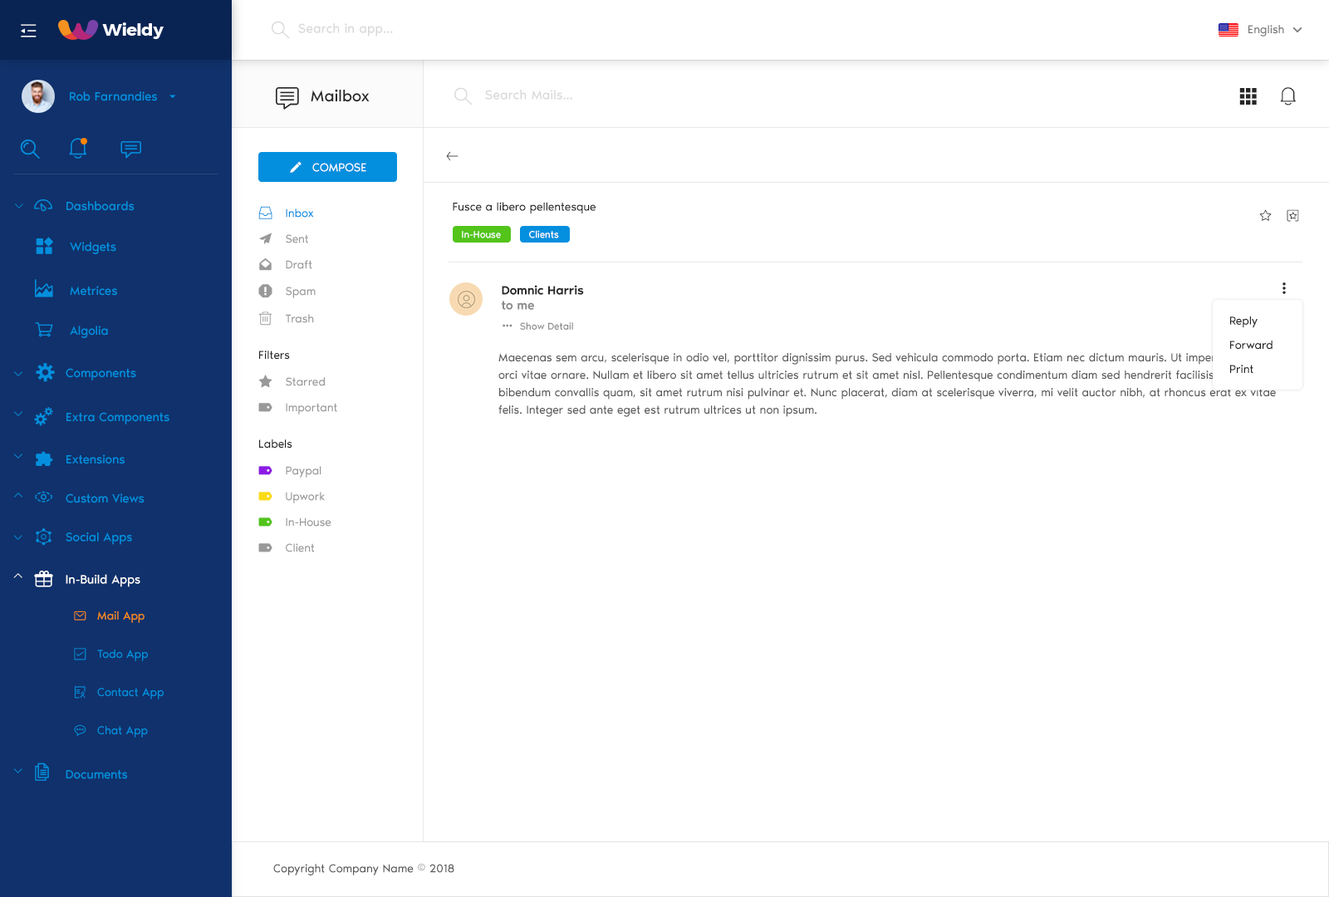
<style>
.page{position:relative;width:1329px;height:897px;background:#ffffff}
.page>*{position:absolute;margin:0}
.t1{font:13.3px "NoirPro-Regular";color:#d9d9d9}
.t2{font:11.6px "NoirPro-Regular";color:#757575}
.t3{font:23.3px "gaxonant";color:#262626}
.t4{font:16.6px "NoirPro-Regular";color:#262626}
.t5{font:18.3px "gaxonant";color:#262626}
.t6{font:12.5px "NoirPro-Regular";color:#038fde}
.t7{font:11.6px "gaxonant";color:#ffffff;text-transform:uppercase}
.t8{font:11.6px "gaxonant"}
.t9{font:11.6px "NoirPro-Regular";color:#ffffff;text-transform:uppercase}
.t10{font:10px "gaxonant"}
.t11{font:18.3px "gaxonant";color:#038fde}
.t12{font:11.6px "NoirPro-Regular";color:#038fde}
.t13{font:11.6px "NoirPro-Regular";color:#262626}
.t14{font:10px "NoirPro-Regular";color:#ffffff}
.t15{font:11.6px "NoirPro-Regular";color:#999999}
.t16{font:13.3px "gaxonant";color:#999999}
.t17{font:12.5px "NoirPro-Medium";color:#262626}
.t18{font:12.5px "gaxonant";color:#262626}
.t19{font:12.5px "NoirPro-Medium";color:#8c8c8c}
.t20{font:11.6px/19.9px "NoirPro-Regular";color:#262626}
.t21{font:10px "gaxonant";color:#8c8c8c}
.t22{font:10px "NoirPro-Regular";color:#8c8c8c}
.t23{font:11.6px/17.4px "NoirPro-Regular";color:#595959}
.t24{font:9.7px "gaxonant";color:#038fde}
.t25{font:10px "gaxonant";color:#038fde}
.t26{font:12.4px "NoirPro-Regular";color:#038fde}
.t27{font:10px "gaxonant";color:#ffffff}
.t28{font:12.4px "NoirPro-Regular";color:#ffffff}
.t29{font:11.8px "gaxonant";color:#fa8c16}
.t30{font:11.8px "NoirPro-Regular";color:#fa8c16}
.t31{font:11.8px "NoirPro-Regular";color:#038fde}
.t32{font:11.8px "gaxonant";color:#038fde}
.t33{font:18.2px "gaxonant";color:#038fde}
.t34{font:11.6px "NoirPro-Regular";color:#595959}
</style>
<div class="page">
<p class="t1" style="left:298px;top:23px;width:95px;height:14px">Search in app...</p>
<p class="t2" style="left:1249px;top:25px;width:35px;height:12px">English</p>
<p class="t3" style="left:276px;top:87px;width:23px;height:23px">U</p>
<p class="t4" style="left:311px;top:89px;width:59px;height:13px">Mailbox</p>
<p class="t1" style="left:485px;top:90px;width:87px;height:10px">Search Mails...</p>
<p class="t5" style="left:1239px;top:88px;width:18px;height:17px">k</p>
<p class="t6" style="left:70px;top:91px;width:87px;height:10px">Rob Farnandies</p>
<p class="t7" style="left:290px;top:161px;width:12px;height:12px">_</p>
<p class="t8" style="left:446px;top:151px;width:13px;height:10px">o</p>
<p class="t9" style="left:312px;top:163px;width:54px;height:9px">Compose</p>
<p class="t10" style="left:15px;top:204px;width:8px;height:5px">2</p>
<p class="t11" style="left:34px;top:199px;width:18px;height:13px">-</p>
<p class="t6" style="left:66px;top:201px;width:69px;height:10px">Dashboards</p>
<p class="t12" style="left:286px;top:209px;width:28px;height:9px">Inbox</p>
<p class="t13" style="left:453px;top:202px;width:143px;height:11px">Fusce a libero pellentesque</p>
<p class="t14" style="left:462px;top:231px;width:39px;height:7px">In-House</p>
<p class="t14" style="left:529px;top:230px;width:30px;height:8px">Clients</p>
<p class="t6" style="left:70px;top:242px;width:46px;height:12px">Widgets</p>
<p class="t15" style="left:286px;top:234px;width:22px;height:9px">Sent</p>
<p class="t16" style="left:259px;top:258px;width:13px;height:13px">[</p>
<p class="t15" style="left:286px;top:260px;width:26px;height:9px">Draft</p>
<p class="t11" style="left:35px;top:279px;width:18px;height:18px">m</p>
<p class="t6" style="left:70px;top:286px;width:47px;height:10px">Metrices</p>
<p class="t15" style="left:286px;top:287px;width:30px;height:11px">Spam</p>
<p class="t17" style="left:502px;top:285px;width:82px;height:10px">Domnic Harris</p>
<p class="t18" style="left:1283px;top:282px;width:3px;height:12px">|</p>
<p class="t19" style="left:502px;top:301px;width:32px;height:9px">to me</p>
<p class="t15" style="left:286px;top:314px;width:28px;height:9px">Trash</p>
<p class="t20" style="left:1230px;top:316px;width:43px;height:58px">Reply<br>Forward<br>Print</p>
<p class="t6" style="left:70px;top:326px;width:38px;height:12px">Algolia</p>
<p class="t21" style="left:503px;top:324px;width:10px;height:3px">{</p>
<p class="t22" style="left:520px;top:322px;width:53px;height:8px">Show Detail</p>
<p class="t13" style="left:259px;top:351px;width:31px;height:9px">Filters</p>
<p class="t23" style="left:498px;top:353px;width:788px;height:64px">Maecenas sem arcu, scelerisque in odio vel, porttitor dignissim purus. Sed vehicula commodo porta. Etiam nec dictum mauris. Ut imperdiet maximus orci vitae ornare. Nullam et libero sit amet tellus ultricies rutrum et sit amet nisl. Pellentesque condimentum diam sed hendrerit facilisis. Suspendisse bibendum convallis quam, sit amet rutrum nisi pulvinar et. Nunc placerat, diam at scelerisque viverra, mi velit auctor nibh, at rhoncus erat ex vitae felis. Integer sed ante eget est rutrum ultrices ut non ipsum.</p>
<p class="t11" style="left:36px;top:363px;width:19px;height:19px">%</p>
<p class="t24" style="left:14px;top:371px;width:8px;height:5px">2</p>
<p class="t6" style="left:66px;top:368px;width:70px;height:12px">Components</p>
<p class="t15" style="left:286px;top:377px;width:39px;height:9px">Starred</p>
<p class="t24" style="left:14px;top:411px;width:8px;height:5px">2</p>
<p class="t6" style="left:66px;top:412px;width:103px;height:12px">Extra Components</p>
<p class="t15" style="left:286px;top:403px;width:51px;height:12px">Important</p>
<p class="t13" style="left:259px;top:439px;width:33px;height:10px">Labels</p>
<p class="t24" style="left:14px;top:454px;width:8px;height:5px">2</p>
<p class="t6" style="left:66px;top:454px;width:59px;height:10px">Extensions</p>
<p class="t15" style="left:286px;top:466px;width:35px;height:12px">Paypal</p>
<p class="t25" style="left:14px;top:493px;width:8px;height:5px">5</p>
<p class="t11" style="left:35px;top:491px;width:17px;height:12px">,</p>
<p class="t6" style="left:66px;top:493px;width:79px;height:10px">Custom Views</p>
<p class="t15" style="left:286px;top:492px;width:40px;height:11px">Upwork</p>
<p class="t15" style="left:286px;top:518px;width:45px;height:9px">In-House</p>
<p class="t26" style="left:66px;top:532px;width:66px;height:13px">Social Apps</p>
<p class="t24" style="left:13px;top:535px;width:9px;height:5px">2</p>
<p class="t15" style="left:286px;top:543px;width:28px;height:9px">Client</p>
<p class="t27" style="left:13px;top:573px;width:9px;height:5px">5</p>
<p class="t28" style="left:66px;top:574px;width:74px;height:13px">In-Build Apps</p>
<p class="t29" style="left:74px;top:611px;width:12px;height:10px">}</p>
<p class="t30" style="left:97px;top:611px;width:48px;height:12px">Mail App</p>
<p class="t31" style="left:97px;top:650px;width:51px;height:11px">Todo App</p>
<p class="t32" style="left:75px;top:686px;width:11px;height:13px">r</p>
<p class="t31" style="left:97px;top:688px;width:67px;height:11px">Contact App</p>
<p class="t32" style="left:74px;top:725px;width:12px;height:11px">V</p>
<p class="t31" style="left:97px;top:726px;width:51px;height:12px">Chat App</p>
<p class="t24" style="left:13px;top:768px;width:9px;height:5px">2</p>
<p class="t33" style="left:35px;top:763px;width:14px;height:18px">)</p>
<p class="t26" style="left:66px;top:770px;width:61px;height:9px">Documents</p>
<p class="t34" style="left:273px;top:864px;width:181px;height:12px">Copyright Company Name © 2018</p>
</div>
